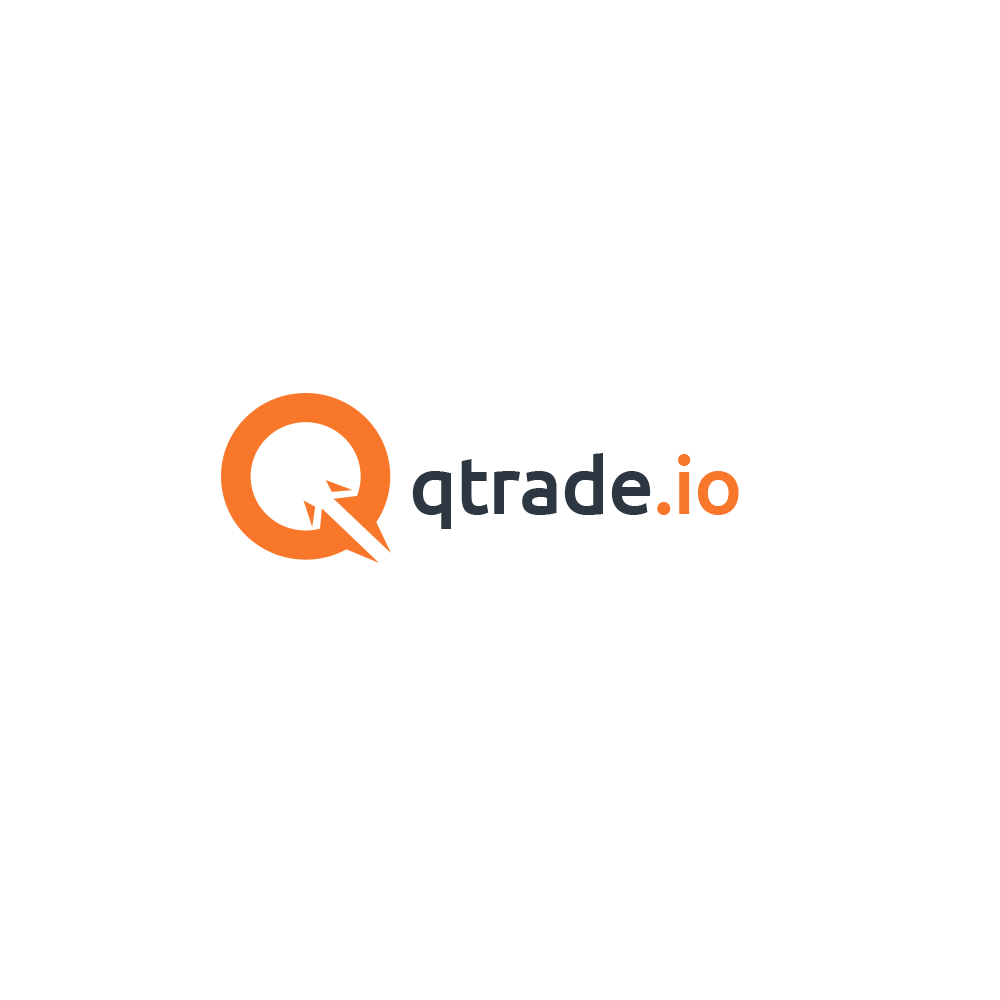
<style>
.page{position:relative;width:1000px;height:1000px;background:#ffffff}
.page>*{position:absolute;margin:0}
.t1{font:81.3px "Ubuntu-Medium";letter-spacing:-0.02em;color:#2c3742}
.t2{font:81.3px "Ubuntu-Medium";letter-spacing:-0.02em;color:#f9772a}
</style>
<div class="page">
<p class="t1" style="left:412px;top:453px;width:327px;height:76px">qtrade<span class="t2">.io</span></p>
</div>
